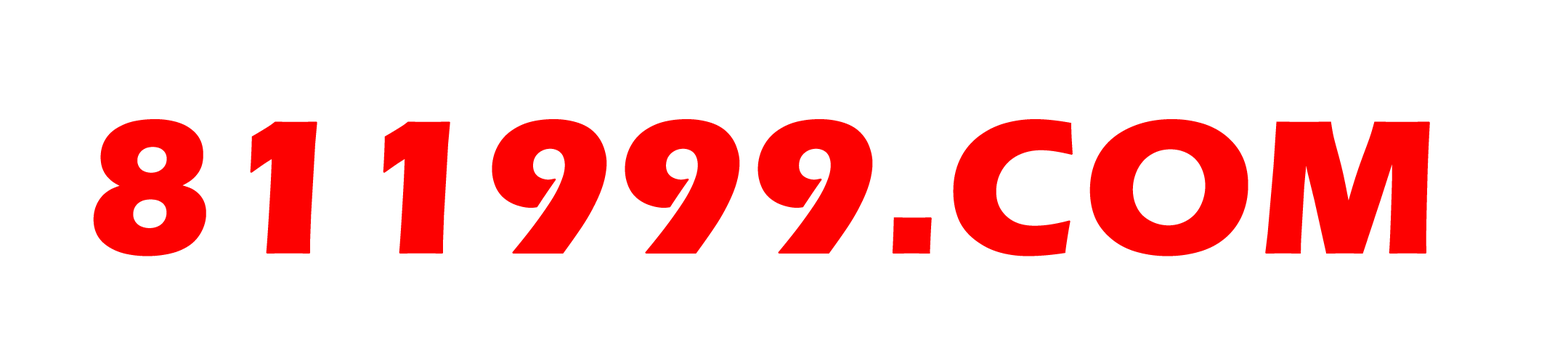
<style>
.page{position:relative;width:1568px;height:340px;background:#ffffff}
.page>*{position:absolute;margin:0}
.t1{font:195.7px "ErasITC-Bold";letter-spacing:0.001em;color:#fd0101;text-transform:uppercase;font-weight:bold}
</style>
<div class="page">
<p class="t1" style="left:93px;top:119px;width:1337px;height:137px">811999.com</p>
</div>
